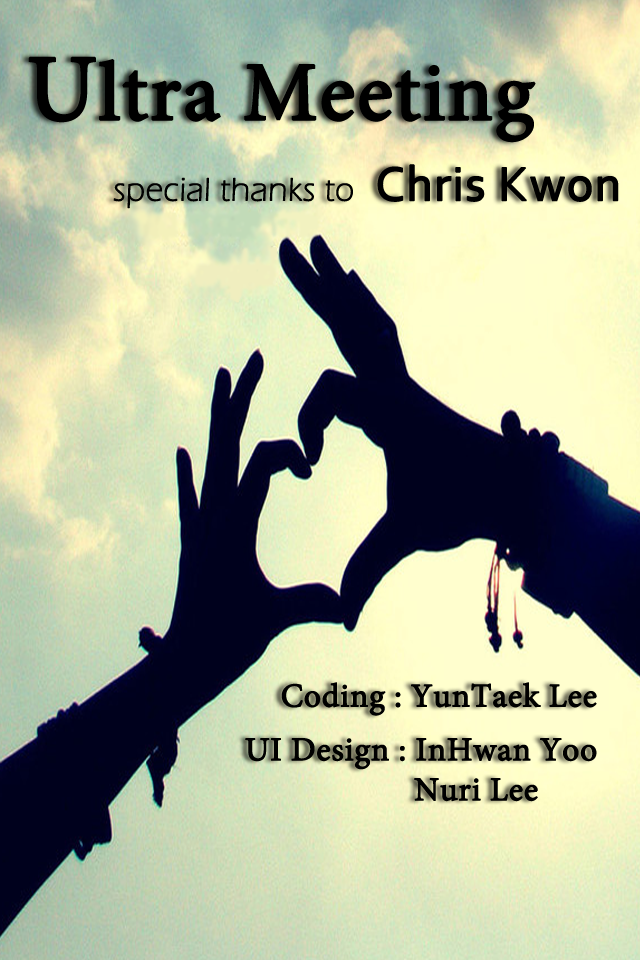
<style>
.page{position:relative;width:640px;height:960px}
.page>*{position:absolute;margin:0}
.t1{font:83.3px "MinionPro-Regular";color:#000000;font-weight:bold}
.t2{font:94.4px "MinionPro-Regular";color:#000000;font-weight:bold}
.t3{font:33.3px "ErasITC-Light";color:#000000;font-weight:bold}
.t4{font:50px "Corbel";color:#000000;font-weight:bold}
.t5{font:33.3px "MinionPro-Regular";color:#000000;font-weight:bold}
</style>
<div class="page">
<p class="t1" style="left:28px;top:56px;width:508px;height:87px"><span class="t2">U</span>ltra Meeting</p>
<p class="t3" style="left:113px;top:164px;width:506px;height:45px">special thanks to <span class="t4"> Chris Kwon</span></p>
<p class="t5" style="left:281px;top:682px;width:316px;height:34px">Coding : YunTaek Lee</p>
<p class="t5" style="left:245px;top:738px;width:352px;height:64px">UI Design : InHwan Yoo<br>                    Nuri Lee</p>
</div>
